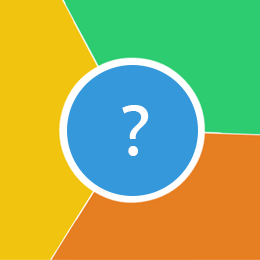
<style>
.page{position:relative;width:260px;height:260px;background:#f1c40f}
.page>*{position:absolute;margin:0}
.t1{font:72px "Ubuntu";color:#ffffff}
</style>
<div class="page">
<p class="t1" style="left:122px;top:105px;width:27px;height:51px">?</p>
</div>
